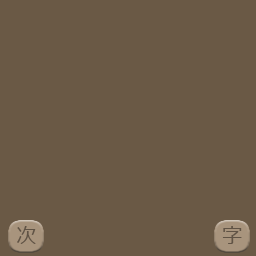
<style>
.page{position:relative;width:256px;height:256px;background:#6a5945}
.page>*{position:absolute;margin:0}
.t1{font:20px "Meiryo";color:#605345}
</style>
<div class="page">
<p class="t1" style="left:17px;top:226px;width:19px;height:18px">次</p>
<p class="t1" style="left:222px;top:226px;width:20px;height:18px">字</p>
</div>
